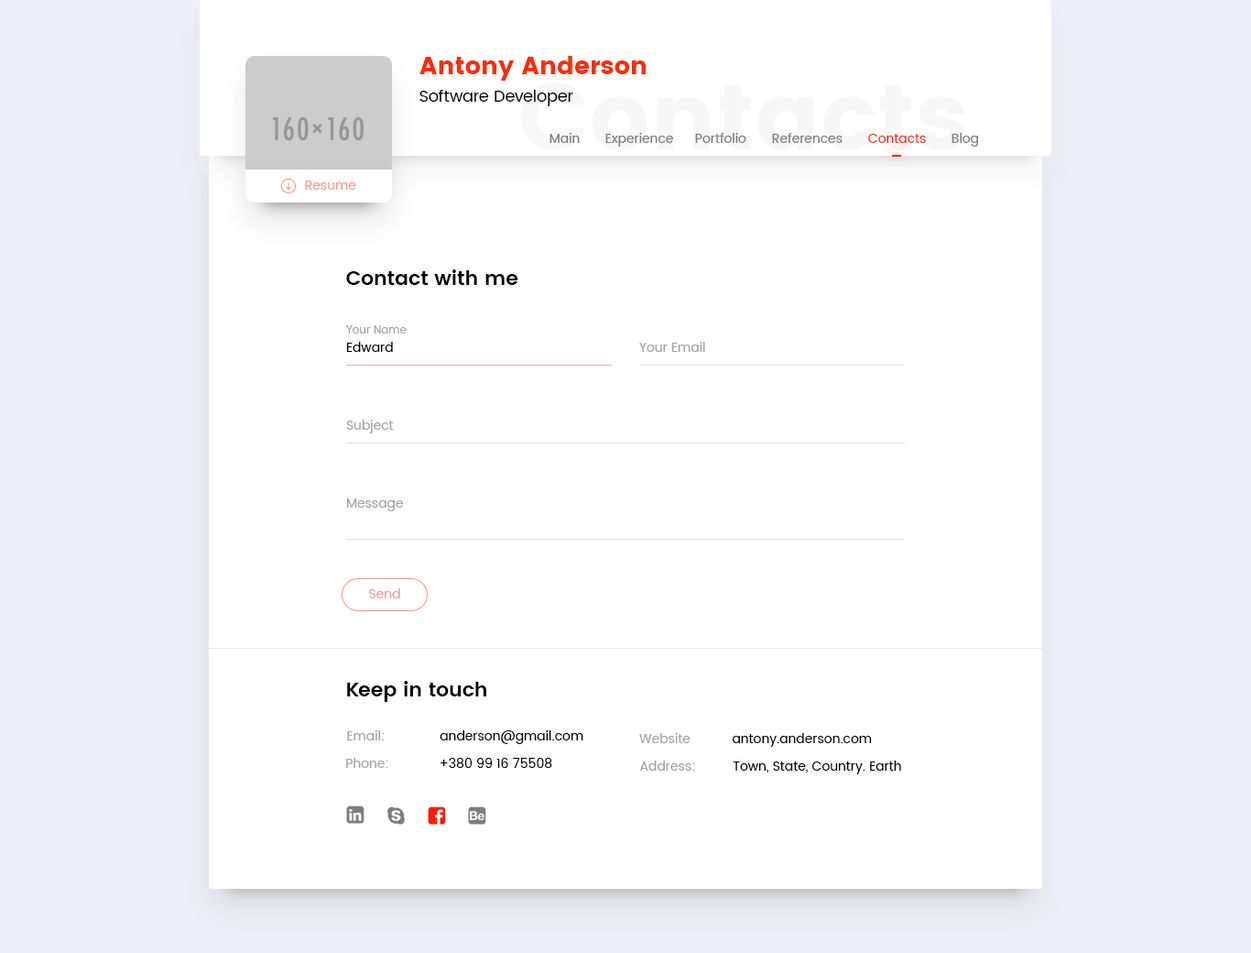
<style>
.page{position:relative;width:1251px;height:953px;background:#ffffff}
.page>*{position:absolute;margin:0}
.t1{font:24.7px "Poppins";color:#ff2a00}
.t2{font:16.5px "Poppins-Regular";color:#000000}
.t3{font:12.8px "Poppins-Regular";color:#7d7d7d}
.t4{font:12.8px "Poppins-Regular";color:#ff2a00}
.t5{font:12.8px "Poppins-Regular";color:#ff978d}
.t6{font:20.2px "Poppins-SemiBold";color:#000000}
.t7{font:11px "Poppins-Regular";color:#a3a3a3}
.t8{font:12.8px "Poppins-Regular";color:#000000}
.t9{font:12.8px "Poppins-Regular";color:#a3a3a3}
</style>
<div class="page">
<p class="t1" style="left:420px;top:56px;width:226px;height:25px">Antony Anderson</p>
<p class="t2" style="left:420px;top:90px;width:154px;height:16px">Software Developer</p>
<p class="t3" style="left:550px;top:133px;width:30px;height:10px">Main</p>
<p class="t3" style="left:606px;top:133px;width:67px;height:14px">Experience</p>
<p class="t3" style="left:695px;top:133px;width:52px;height:10px">Portfolio</p>
<p class="t3" style="left:772px;top:133px;width:71px;height:10px">References</p>
<p class="t4" style="left:869px;top:134px;width:57px;height:9px">Contacts</p>
<p class="t3" style="left:952px;top:133px;width:26px;height:14px">Blog</p>
<p class="t5" style="left:305px;top:180px;width:51px;height:10px">Resume</p>
<p class="t6" style="left:346px;top:269px;width:173px;height:16px">Contact with me</p>
<p class="t7" style="left:346px;top:325px;width:61px;height:8px">Your Name</p>
<p class="t8" style="left:346px;top:342px;width:47px;height:10px">Edward</p>
<p class="t9" style="left:639px;top:342px;width:66px;height:10px">Your Email</p>
<p class="t9" style="left:346px;top:420px;width:48px;height:13px">Subject</p>
<p class="t9" style="left:346px;top:498px;width:58px;height:13px">Message</p>
<p class="t5" style="left:369px;top:588px;width:31px;height:10px">Send</p>
<p class="t6" style="left:347px;top:681px;width:139px;height:21px">Keep in touch</p>
<p class="t9" style="left:347px;top:730px;width:37px;height:10px">Email:</p>
<p class="t8" style="left:440px;top:730px;width:144px;height:14px">anderson@gmail.com</p>
<p class="t9" style="left:639px;top:733px;width:52px;height:10px">Website</p>
<p class="t8" style="left:732px;top:733px;width:140px;height:14px">antony.anderson.com</p>
<p class="t9" style="left:346px;top:758px;width:42px;height:10px">Phone:</p>
<p class="t8" style="left:441px;top:758px;width:111px;height:10px">+380 99 16 75508</p>
<p class="t9" style="left:640px;top:760px;width:55px;height:10px">Address:</p>
<p class="t8" style="left:733px;top:760px;width:169px;height:14px">Town, State, Country. Earth</p>
</div>
